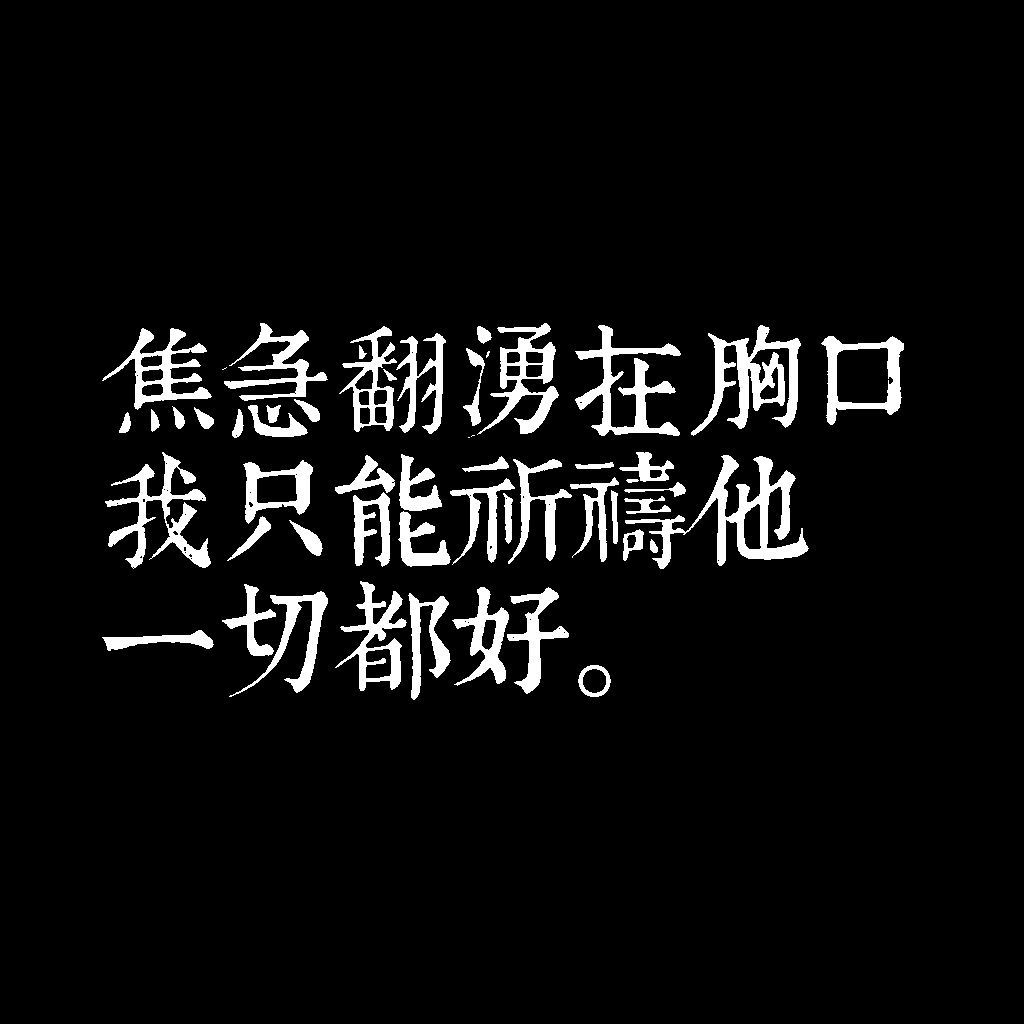
<style>
.page{position:relative;width:1024px;height:1024px;background:#000000}
.page>*{position:absolute;margin:0}
.t1{font:120px/130px "TpldKhangXiDictTrial";letter-spacing:-0.02em;color:#ffffff}
</style>
<div class="page">
<p class="t1" style="left:102px;top:323px;width:802px;height:377px">焦急翻湧在胸口<br>我只能祈禱他<br>一切都好。</p>
</div>
